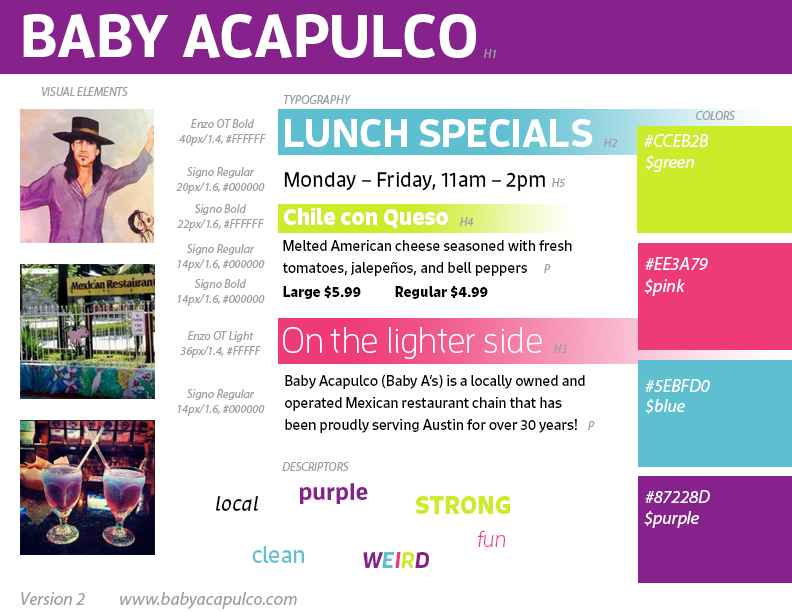
<style>
.page{position:relative;width:792px;height:612px;background:#fefffe}
.page>*{position:absolute;margin:0}
.t1{font:60px "EnzoOT-Bold";color:#ffffff}
.t2{font:12px "MyriadPro-It";color:#9e9e9e}
.t3{font:40px "EnzoOT-Bold";color:#ffffff}
.t4{font:18px "MyriadPro-It";color:#ffffff}
.t5{font:20px "Signo-Regular";color:#000000}
.t6{font:22px "Signo-Bold";color:#ffffff}
.t7{font:14px/22px "Signo-Regular";color:#000000}
.t8{font:14px "Signo-Bold";color:#000000}
.t9{font:36px "EnzoOT-Light";color:#ffffff}
.t10{font:24px "EnzoOT-Bold";color:#87228d}
.t11{font:20px "Signo-Italic";color:#000000}
.t12{font:24px "Signo-Bold";color:#cceb2b}
.t13{font:22px "EnzoOT-LightIta";color:#ee3a79}
.t14{font:22px "Signo-Regular";color:#5ebfd0}
.t15{font:22px "EnzoOT-BoldIta";color:#87228d}
.t16{font:22px "EnzoOT-BoldIta";color:#5ebfd0}
.t17{font:22px "EnzoOT-BoldIta";color:#ee3a79}
.t18{font:22px "EnzoOT-BoldIta";color:#cceb2b}
.t19{font:18px "MyriadPro-It";color:#9e9e9e}
</style>
<div class="page">
<p class="t1" style="left:23px;top:14px;width:453px;height:44px">BABY ACAPULCO</p>
<p class="t2" style="left:484px;top:49px;width:12px;height:9px">H1</p>
<p class="t2" style="left:42px;top:87px;width:86px;height:9px">VISUAL ELEMENTS</p>
<p class="t2" style="left:283px;top:95px;width:68px;height:9px">TYPOGRAPHY</p>
<p class="t2" style="left:696px;top:111px;width:39px;height:9px">COLORS</p>
<p class="t2" style="left:179px;top:119px;width:87px;height:27px;text-align:center">Enzo OT Bold<br>40px/1.4, #FFFFFF</p>
<p class="t3" style="left:285px;top:119px;width:308px;height:28px">LUNCH SPECIALS</p>
<p class="t4" style="left:644px;top:134px;width:64px;height:13px">#CCEB2B</p>
<p class="t2" style="left:604px;top:138px;width:13px;height:9px">H2</p>
<p class="t4" style="left:645px;top:154px;width:49px;height:18px">$green</p>
<p class="t2" style="left:176px;top:167px;width:89px;height:27px;text-align:center">Signo Regular<br>20px/1.6, #000000</p>
<p class="t5" style="left:284px;top:172px;width:261px;height:19px">Monday – Friday, 11am – 2pm</p>
<p class="t2" style="left:552px;top:178px;width:13px;height:9px">H5</p>
<p class="t2" style="left:177px;top:204px;width:87px;height:27px;text-align:center">Signo Bold<br>22px/1.6, #FFFFFF</p>
<p class="t6" style="left:284px;top:208px;width:164px;height:21px">Chile con Queso</p>
<p class="t2" style="left:460px;top:217px;width:13px;height:9px">H4</p>
<p class="t2" style="left:178px;top:244px;width:87px;height:27px;text-align:center">Signo Regular<br>14px/1.6, #000000</p>
<p class="t7" style="left:282px;top:240px;width:290px;height:36px">Melted American cheese seasoned with fresh <br>tomatoes, jalepeños, and bell peppers</p>
<p class="t4" style="left:645px;top:257px;width:63px;height:13px">#EE3A79</p>
<p class="t2" style="left:544px;top:264px;width:7px;height:9px">P</p>
<p class="t2" style="left:178px;top:279px;width:87px;height:27px;text-align:center">Signo Bold<br>14px/1.6, #000000</p>
<p class="t4" style="left:644px;top:278px;width:41px;height:18px">$pink</p>
<p class="t8" style="left:283px;top:286px;width:78px;height:13px">Large $5.99</p>
<p class="t8" style="left:395px;top:286px;width:93px;height:13px">Regular $4.99</p>
<p class="t9" style="left:283px;top:327px;width:259px;height:32px">On the lighter side</p>
<p class="t2" style="left:180px;top:331px;width:81px;height:27px;text-align:center">Enzo OT Light<br>36px/1.4, #FFFFF</p>
<p class="t2" style="left:554px;top:344px;width:13px;height:9px">H3</p>
<p class="t7" style="left:285px;top:374px;width:300px;height:59px">Baby Acapulco (Baby A’s) is a locally owned and operated Mexican restaurant chain that has been proudly serving Austin for over 30 years!</p>
<p class="t2" style="left:178px;top:389px;width:87px;height:27px;text-align:center">Signo Regular<br>14px/1.6, #000000</p>
<p class="t4" style="left:645px;top:379px;width:65px;height:13px">#5EBFD0</p>
<p class="t4" style="left:645px;top:398px;width:40px;height:16px">$blue</p>
<p class="t2" style="left:588px;top:421px;width:7px;height:9px">P</p>
<p class="t2" style="left:282px;top:462px;width:67px;height:9px">DESCRIPTORS</p>
<p class="t10" style="left:299px;top:483px;width:69px;height:21px">purple</p>
<p class="t11" style="left:216px;top:496px;width:43px;height:15px">local</p>
<p class="t12" style="left:416px;top:496px;width:94px;height:18px">STRONG</p>
<p class="t4" style="left:645px;top:490px;width:65px;height:13px">#87228D</p>
<p class="t4" style="left:644px;top:510px;width:55px;height:18px">$purple</p>
<p class="t13" style="left:477px;top:530px;width:28px;height:17px">fun</p>
<p class="t14" style="left:252px;top:546px;width:52px;height:17px">clean</p>
<p class="t15" style="left:363px;top:552px;width:66px;height:16px">W<span class="t16">E</span><span class="t17">I</span><span class="t18">R</span>D</p>
<p class="t19" style="left:21px;top:592px;width:64px;height:13px">Version 2</p>
<p class="t19" style="left:120px;top:592px;width:177px;height:17px">www.babyacapulco.com</p>
</div>
